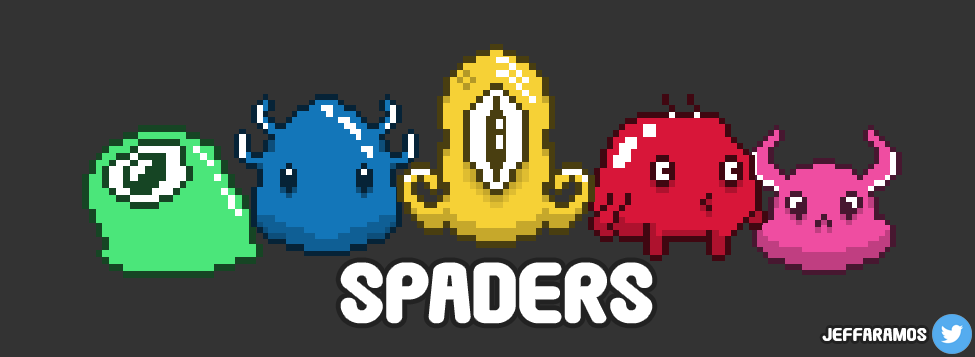
<style>
.page{position:relative;width:975px;height:357px;background:#333333}
.page>*{position:absolute;margin:0}
.t1{font:71.7px "Round_Pop";color:#ffffff}
.t2{font:16.1px "Round_Pop";color:#ffffff}
</style>
<div class="page">
<p class="t1" style="left:341px;top:263px;width:311px;height:60px">SPADERS</p>
<p class="t2" style="left:822px;top:328px;width:105px;height:13px">@jeffaramos</p>
</div>
